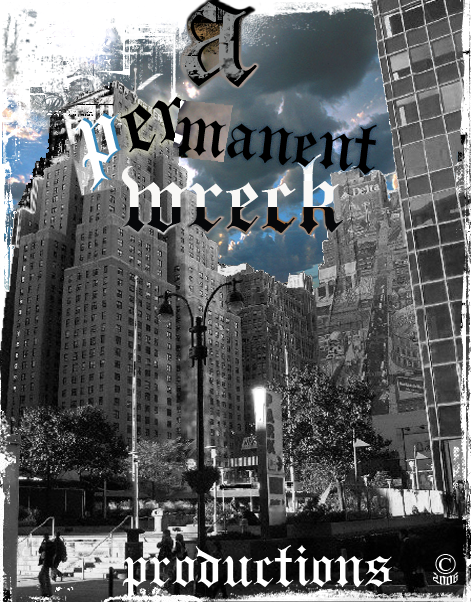
<style>
.page{position:relative;width:471px;height:602px}
.page>*{position:absolute;margin:0}
.t1{font:176.8px "HeadlineText"}
.t2{font:96.7px "HeadlineText";color:#000000}
.t3{font:100px "HeadlineText"}
.t4{font:96.7px "HeadlineText";color:#ffffff}
.t5{font:72px "HeadlineText";color:#000000}
.t6{font:60px "HeadlineText";color:#ffffff}
.t7{font:28.9px "HeadlineText";color:#ffffff}
.t8{font:14px "HeadlineText";color:#ffffff}
</style>
<div class="page">
<p class="t1" style="left:185px;top:0px;width:72px;height:87px">a</p>
<p class="t2" style="left:120px;top:96px;width:70px;height:57px;rotate:-14deg">er</p>
<p class="t3" style="left:74px;top:113px;width:48px;height:78px;rotate:-14deg">p</p>
<p class="t4" style="left:73px;top:115px;width:45px;height:75px;rotate:-14deg">p</p>
<p class="t5" style="left:177px;top:117px;width:49px;height:41px;rotate:7deg">m</p>
<p class="t5" style="left:227px;top:123px;width:150px;height:52px;rotate:7deg">anent</p>
<p class="t6" style="left:122px;top:545px;width:270px;height:56px">productions</p>
<p class="t7" style="left:435px;top:554px;width:21px;height:20px">©</p>
<p class="t8" style="left:433px;top:572px;width:26px;height:14px">2006</p>
</div>
